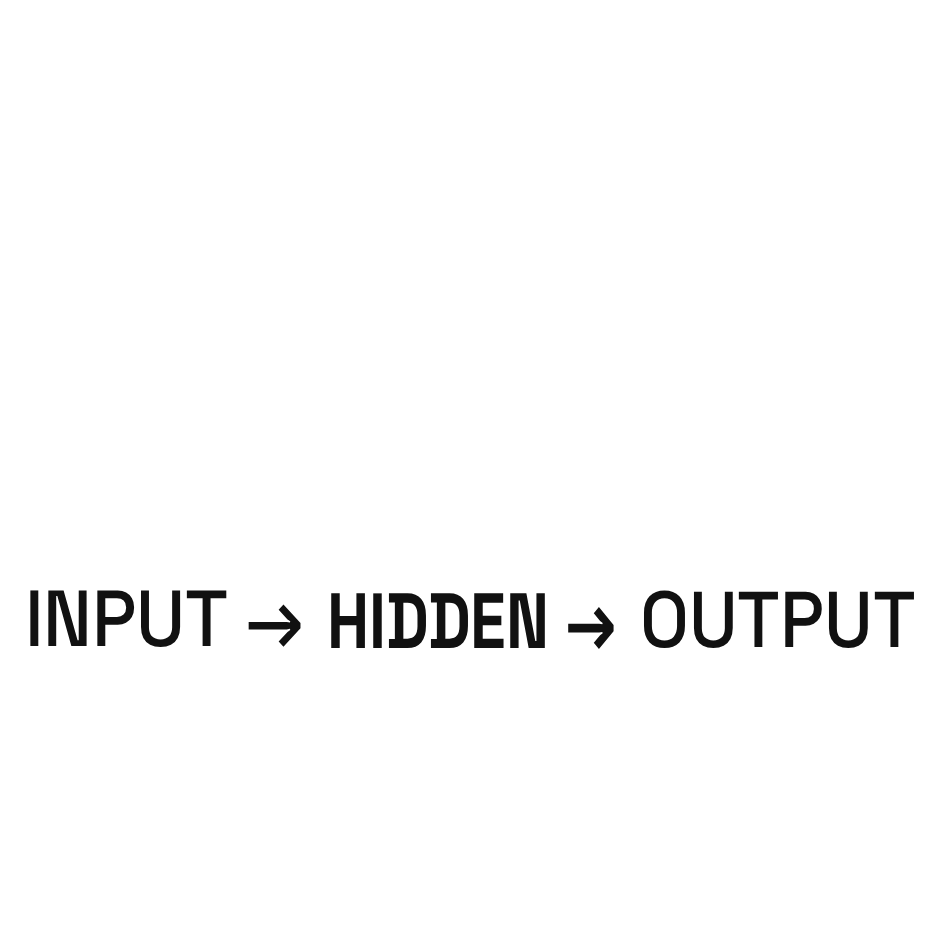
<style>
.page{position:relative;width:944px;height:944px;background:#ffffff}
.page>*{position:absolute;margin:0}
.t1{font:79.4px "SpaceGroteskLight-Medium";color:#111111;scale:0.92 1}
.t2{font:78.1px "SpaceGroteskLight-Bold";color:#111111;scale:0.82 1}
.t3{font:79px "SpaceGroteskLight-Medium";color:#111111;scale:0.92 1}
</style>
<div class="page">
<p class="t1" style="left:30px;top:590px;width:271px;height:57px">INPUT →</p>
<p class="t2" style="left:331px;top:593px;width:283px;height:56px">HIDDEN →</p>
<p class="t3" style="left:643px;top:590px;width:271px;height:58px">OUTPUT</p>
</div>
